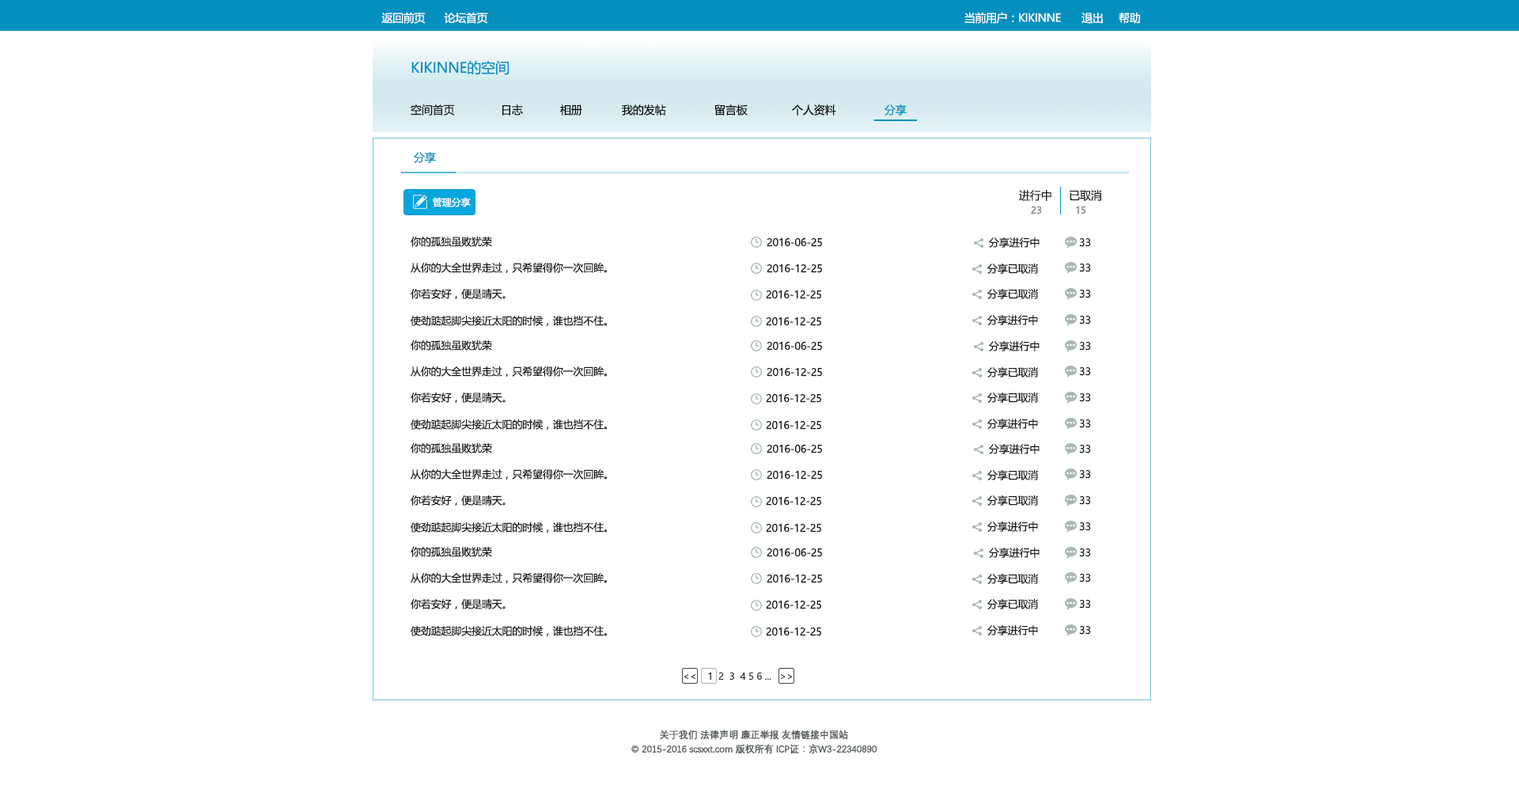
<style>
.page{position:relative;width:1519px;height:785px;background:#ffffff}
.page>*{position:absolute;margin:0}
.t1{font:11.1px "MicrosoftYaHei";letter-spacing:-0.025em;color:#ffffff}
.t2{font:14.2px "MicrosoftYaHei";letter-spacing:-0.01em;color:#0390bf}
.t3{font:11.1px "MicrosoftYaHei";letter-spacing:-0.01em;color:#1c1d1d}
.t4{font:11.1px "MicrosoftYaHei";letter-spacing:-0.01em;color:#040404}
.t5{font:11.1px "MicrosoftYaHei";letter-spacing:-0.01em;color:#0390bf}
.t6{font:9.5px "MicrosoftYaHei";letter-spacing:-0.01em;color:#ffffff}
.t7{font:11.1px "MicrosoftYaHei";letter-spacing:-0.01em;color:#242323}
.t8{font:9.5px "MicrosoftYaHei";letter-spacing:-0.01em;color:#7b7b7b}
.t9{font:10.3px "MicrosoftYaHei";letter-spacing:-0.01em;color:#131616}
.t10{font:9.5px "MicrosoftYaHei";letter-spacing:-0.01em;color:#38393a}
.t11{font:9.5px "MicrosoftYaHei";letter-spacing:-0.01em;color:#252626}
.t12{font:9.5px/14.2px "DengXian-Regular";letter-spacing:-0.025em;color:#545a5c;font-weight:bold}
</style>
<div class="page">
<p class="t1" style="left:381px;top:12px;width:45px;height:12px">返回前页</p>
<p class="t1" style="left:444px;top:12px;width:44px;height:12px">论坛首页</p>
<p class="t1" style="left:965px;top:12px;width:96px;height:12px">当前用户：KIKINNE</p>
<p class="t1" style="left:1082px;top:13px;width:21px;height:11px">退出</p>
<p class="t1" style="left:1119px;top:12px;width:21px;height:12px">帮助</p>
<p class="t2" style="left:411px;top:60px;width:98px;height:15px">KIKINNE的空间</p>
<p class="t3" style="left:411px;top:104px;width:44px;height:12px">空间首页</p>
<p class="t4" style="left:502px;top:104px;width:21px;height:12px">日志</p>
<p class="t4" style="left:560px;top:104px;width:22px;height:12px">相册</p>
<p class="t4" style="left:622px;top:104px;width:44px;height:12px">我的发帖</p>
<p class="t4" style="left:714px;top:104px;width:34px;height:12px">留言板</p>
<p class="t4" style="left:792px;top:104px;width:44px;height:12px">个人资料</p>
<p class="t5" style="left:885px;top:104px;width:22px;height:12px">分享</p>
<p class="t5" style="left:414px;top:152px;width:22px;height:11px">分享</p>
<p class="t6" style="left:433px;top:197px;width:38px;height:10px">管理分享</p>
<p class="t7" style="left:1019px;top:190px;width:33px;height:11px">进行中</p>
<p class="t7" style="left:1070px;top:190px;width:32px;height:11px">已取消</p>
<p class="t8" style="left:1031px;top:206px;width:11px;height:8px">23</p>
<p class="t8" style="left:1076px;top:206px;width:10px;height:8px">15</p>
<p class="t9" style="left:411px;top:237px;width:81px;height:10px">你的孤独虽败犹荣</p>
<p class="t9" style="left:767px;top:237px;width:56px;height:10px">2016-06-25</p>
<p class="t9" style="left:989px;top:237px;width:51px;height:11px">分享进行中</p>
<p class="t9" style="left:1079px;top:238px;width:12px;height:9px">33</p>
<p class="t9" style="left:411px;top:263px;width:197px;height:10px">从你的大全世界走过，只希望得你一次回眸。</p>
<p class="t9" style="left:767px;top:263px;width:56px;height:10px">2016-12-25</p>
<p class="t9" style="left:987px;top:263px;width:51px;height:11px">分享已取消</p>
<p class="t9" style="left:1079px;top:263px;width:12px;height:9px">33</p>
<p class="t9" style="left:411px;top:289px;width:95px;height:10px">你若安好，便是晴天。</p>
<p class="t9" style="left:766px;top:290px;width:56px;height:9px">2016-12-25</p>
<p class="t9" style="left:987px;top:289px;width:51px;height:10px">分享已取消</p>
<p class="t9" style="left:1079px;top:290px;width:12px;height:8px">33</p>
<p class="t9" style="left:411px;top:316px;width:197px;height:10px">使劲踮起脚尖接近太阳的时候，谁也挡不住。</p>
<p class="t9" style="left:766px;top:316px;width:56px;height:10px">2016-12-25</p>
<p class="t9" style="left:987px;top:315px;width:51px;height:10px">分享进行中</p>
<p class="t9" style="left:1079px;top:316px;width:12px;height:8px">33</p>
<p class="t9" style="left:411px;top:340px;width:81px;height:11px">你的孤独虽败犹荣</p>
<p class="t9" style="left:767px;top:341px;width:56px;height:10px">2016-06-25</p>
<p class="t9" style="left:989px;top:341px;width:51px;height:10px">分享进行中</p>
<p class="t9" style="left:1079px;top:342px;width:12px;height:9px">33</p>
<p class="t9" style="left:411px;top:366px;width:197px;height:11px">从你的大全世界走过，只希望得你一次回眸。</p>
<p class="t9" style="left:767px;top:367px;width:56px;height:10px">2016-12-25</p>
<p class="t9" style="left:987px;top:367px;width:51px;height:10px">分享已取消</p>
<p class="t9" style="left:1079px;top:367px;width:12px;height:9px">33</p>
<p class="t9" style="left:411px;top:392px;width:95px;height:11px">你若安好，便是晴天。</p>
<p class="t9" style="left:766px;top:393px;width:56px;height:10px">2016-12-25</p>
<p class="t9" style="left:987px;top:392px;width:51px;height:11px">分享已取消</p>
<p class="t9" style="left:1079px;top:393px;width:12px;height:9px">33</p>
<p class="t9" style="left:411px;top:419px;width:197px;height:11px">使劲踮起脚尖接近太阳的时候，谁也挡不住。</p>
<p class="t9" style="left:766px;top:420px;width:56px;height:10px">2016-12-25</p>
<p class="t9" style="left:987px;top:419px;width:51px;height:10px">分享进行中</p>
<p class="t9" style="left:1079px;top:419px;width:12px;height:9px">33</p>
<p class="t9" style="left:411px;top:443px;width:81px;height:10px">你的孤独虽败犹荣</p>
<p class="t9" style="left:767px;top:444px;width:56px;height:9px">2016-06-25</p>
<p class="t9" style="left:989px;top:444px;width:51px;height:10px">分享进行中</p>
<p class="t9" style="left:1079px;top:445px;width:12px;height:8px">33</p>
<p class="t9" style="left:411px;top:469px;width:197px;height:10px">从你的大全世界走过，只希望得你一次回眸。</p>
<p class="t9" style="left:767px;top:470px;width:56px;height:9px">2016-12-25</p>
<p class="t9" style="left:987px;top:470px;width:51px;height:10px">分享已取消</p>
<p class="t9" style="left:1079px;top:470px;width:12px;height:9px">33</p>
<p class="t9" style="left:411px;top:495px;width:95px;height:11px">你若安好，便是晴天。</p>
<p class="t9" style="left:766px;top:496px;width:56px;height:10px">2016-12-25</p>
<p class="t9" style="left:987px;top:495px;width:51px;height:11px">分享已取消</p>
<p class="t9" style="left:1079px;top:496px;width:12px;height:9px">33</p>
<p class="t9" style="left:987px;top:521px;width:51px;height:11px">分享进行中</p>
<p class="t9" style="left:411px;top:522px;width:197px;height:11px">使劲踮起脚尖接近太阳的时候，谁也挡不住。</p>
<p class="t9" style="left:766px;top:523px;width:56px;height:10px">2016-12-25</p>
<p class="t9" style="left:1079px;top:522px;width:12px;height:9px">33</p>
<p class="t9" style="left:411px;top:547px;width:81px;height:10px">你的孤独虽败犹荣</p>
<p class="t9" style="left:767px;top:548px;width:56px;height:9px">2016-06-25</p>
<p class="t9" style="left:989px;top:548px;width:51px;height:10px">分享进行中</p>
<p class="t9" style="left:1079px;top:548px;width:12px;height:9px">33</p>
<p class="t9" style="left:411px;top:573px;width:197px;height:10px">从你的大全世界走过，只希望得你一次回眸。</p>
<p class="t9" style="left:767px;top:574px;width:56px;height:9px">2016-12-25</p>
<p class="t9" style="left:987px;top:574px;width:51px;height:10px">分享已取消</p>
<p class="t9" style="left:1079px;top:574px;width:12px;height:8px">33</p>
<p class="t9" style="left:411px;top:599px;width:95px;height:10px">你若安好，便是晴天。</p>
<p class="t9" style="left:766px;top:600px;width:56px;height:9px">2016-12-25</p>
<p class="t9" style="left:987px;top:599px;width:51px;height:10px">分享已取消</p>
<p class="t9" style="left:1079px;top:600px;width:12px;height:8px">33</p>
<p class="t9" style="left:411px;top:626px;width:197px;height:10px">使劲踮起脚尖接近太阳的时候，谁也挡不住。</p>
<p class="t9" style="left:766px;top:627px;width:56px;height:9px">2016-12-25</p>
<p class="t9" style="left:987px;top:625px;width:51px;height:10px">分享进行中</p>
<p class="t9" style="left:1079px;top:626px;width:12px;height:9px">33</p>
<p class="t10" style="left:684px;top:672px;width:109px;height:8px">&lt;&lt;    1  2 <span class="t11"> 3</span>  4 5 6 ...   &gt;&gt;</p>
<p class="t12" style="left:631px;top:730px;width:246px;height:24px;text-align:center">关于我们 法律声明 廉正举报 友情链接中国站<br>© 2015-2016 scsxxt.com 版权所有 ICP证：京W3-22340890</p>
</div>
